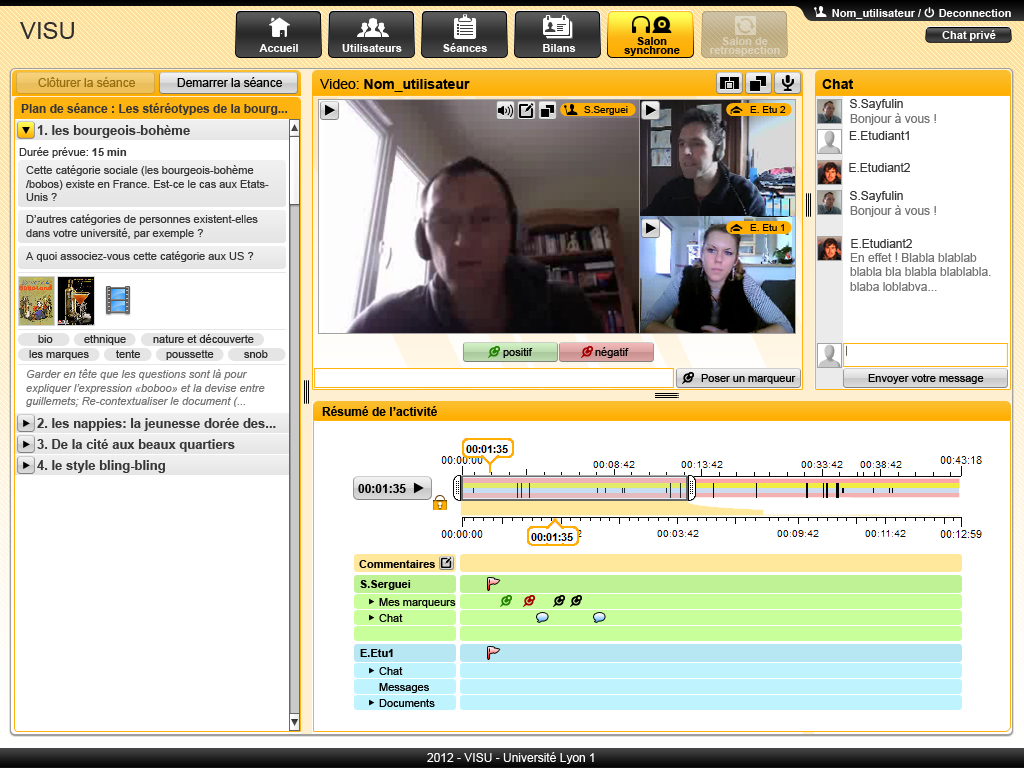
<style>
.page{position:relative;width:1024px;height:768px;background:#ffffff}
.page>*{position:absolute;margin:0}
.t1{font:11px "Arial-BoldMT";color:#ffffff}
.t2{font:24px "ArialMT";color:#2e2e2e}
.t3{font:11px/9px "Arial-BoldMT";color:#000000}
.t4{font:11px/9px "Arial-BoldMT";color:#dccfb6}
.t5{font:12px "ArialMT";color:#986d0e}
.t6{font:12px "ArialMT";color:#000000}
.t7{font:14px "Arial-BoldMT";color:#000000}
.t8{font:14px "ArialMT";color:#000000}
.t9{font:12px "ArialMT";color:#373737}
.t10{font:12px "Arial-BoldMT";color:#373737}
.t11{font:10px "ArialMT";color:#000000}
.t12{font:12px "ArialMT";color:#737373}
.t13{font:13px "Arial-BoldMT";color:#373737}
.t14{font:11px "ArialMT";color:#373737}
.t15{font:11px "Arial-BoldMT";color:#373737}
.t16{font:11px "ArialMT";color:#2b2b2b}
.t17{font:11px "ArialMT";color:#000000}
.t18{font:11px "Arial-ItalicMT";color:#737373}
.t19{font:12px "Arial-BoldMT";color:#000000}
.t20{font:11px "Arial-BoldMT";color:#000000}
.t21{font:12px "ArialMT";color:#fefefe}
</style>
<div class="page">
<p class="t1" style="left:832px;top:9px;width:89px;height:10px">Nom_utilisateur /</p>
<p class="t1" style="left:939px;top:9px;width:72px;height:8px">Deconnection</p>
<p class="t2" style="left:20px;top:22px;width:54px;height:17px">VISU</p>
<p class="t1" style="left:942px;top:30px;width:54px;height:11px">Chat privé</p>
<p class="t3" style="left:624px;top:37px;width:56px;height:19px;text-align:center">Salon<br>synchrone</p>
<p class="t4" style="left:710px;top:37px;width:70px;height:19px;text-align:center">Salon de<br>retrospection</p>
<p class="t1" style="left:259px;top:44px;width:39px;height:8px">Accueil</p>
<p class="t1" style="left:342px;top:44px;width:60px;height:8px">Utilisateurs</p>
<p class="t1" style="left:443px;top:43px;width:44px;height:9px">Séances</p>
<p class="t1" style="left:543px;top:44px;width:33px;height:8px">Bilans</p>
<p class="t5" style="left:38px;top:77px;width:97px;height:10px">Clôturer la séance</p>
<p class="t6" style="left:177px;top:77px;width:105px;height:10px">Demarrer la séance</p>
<p class="t7" style="left:320px;top:79px;width:150px;height:13px"><span class="t8">Video:</span> Nom_utilisateur</p>
<p class="t7" style="left:822px;top:79px;width:31px;height:10px">Chat</p>
<p class="t9" style="left:850px;top:99px;width:53px;height:11px">S.Sayfulin</p>
<p class="t10" style="left:21px;top:103px;width:267px;height:12px">Plan de séance : Les stéréotypes de la bourg...</p>
<p class="t11" style="left:584px;top:106px;width:44px;height:9px">S.Serguei</p>
<p class="t11" style="left:750px;top:106px;width:36px;height:7px">E. Etu 2</p>
<p class="t12" style="left:850px;top:113px;width:86px;height:12px">Bonjour à vous !</p>
<p class="t13" style="left:37px;top:125px;width:153px;height:13px">1. les bourgeois-bohème</p>
<p class="t9" style="left:849px;top:131px;width:60px;height:9px">E.Etudiant1</p>
<p class="t14" style="left:19px;top:147px;width:108px;height:11px">Durée prévue:<span class="t15"> 15 min</span></p>
<p class="t14" style="left:25px;top:165px;width:244px;height:36px">Cette catégorie sociale (les bourgeois-bohème /bobos) existe en France. Est-ce le cas aux Etats- Unis ?</p>
<p class="t9" style="left:849px;top:163px;width:61px;height:9px">E.Etudiant2</p>
<p class="t12" style="left:850px;top:205px;width:86px;height:12px">Bonjour à vous !</p>
<p class="t14" style="left:26px;top:214px;width:232px;height:25px">D’autres catégories de personnes existent-elles dans votre université, par exemple ?</p>
<p class="t11" style="left:750px;top:224px;width:34px;height:7px">E. Etu 1</p>
<p class="t14" style="left:26px;top:251px;width:228px;height:11px">A quoi associez-vous cette catégorie aux US ?</p>
<p class="t12" style="left:850px;top:253px;width:141px;height:38px">En effet ! Blabla blablab <br>blabla bla blabla blablabla.<br>blaba loblabva...</p>
<p class="t16" style="left:38px;top:335px;width:15px;height:8px">bio</p>
<p class="t16" style="left:84px;top:335px;width:42px;height:10px">ethnique</p>
<p class="t16" style="left:153px;top:334px;width:101px;height:9px">nature et découverte</p>
<p class="t16" style="left:29px;top:350px;width:60px;height:10px">les marques</p>
<p class="t16" style="left:116px;top:350px;width:24px;height:8px">tente</p>
<p class="t16" style="left:166px;top:350px;width:48px;height:10px">poussette</p>
<p class="t16" style="left:244px;top:350px;width:24px;height:8px">snob</p>
<p class="t17" style="left:503px;top:348px;width:30px;height:10px">positif</p>
<p class="t17" style="left:595px;top:347px;width:34px;height:11px">négatif</p>
<p class="t18" style="left:26px;top:369px;width:239px;height:38px">Garder en tête que les questions sont là pour expliquer l’expression «boboo» et la devise entre guillemets; Re-contextualiser le document (...</p>
<p class="t17" style="left:701px;top:374px;width:95px;height:10px">Poser un marqueur</p>
<p class="t17" style="left:868px;top:374px;width:116px;height:10px">Envoyer votre message</p>
<p class="t19" style="left:322px;top:406px;width:115px;height:10px">Résumé de l’activité</p>
<p class="t13" style="left:37px;top:418px;width:239px;height:13px">2. les nappies: la jeunesse dorée des...</p>
<p class="t13" style="left:37px;top:439px;width:198px;height:13px">3. De la cité aux beaux quartiers</p>
<p class="t13" style="left:37px;top:460px;width:128px;height:13px">4. le style bling-bling</p>
<p class="t19" style="left:358px;top:484px;width:48px;height:9px">00:01:35</p>
<p class="t20" style="left:359px;top:560px;width:76px;height:8px">Commentaires</p>
<p class="t20" style="left:360px;top:580px;width:51px;height:10px">S.Serguei</p>
<p class="t17" style="left:379px;top:598px;width:77px;height:10px">Mes marqueurs</p>
<p class="t17" style="left:379px;top:614px;width:24px;height:8px">Chat</p>
<p class="t20" style="left:360px;top:649px;width:33px;height:8px">E.Etu1</p>
<p class="t17" style="left:379px;top:667px;width:24px;height:8px">Chat</p>
<p class="t17" style="left:379px;top:683px;width:50px;height:10px">Messages</p>
<p class="t17" style="left:379px;top:699px;width:56px;height:8px">Documents</p>
<p class="t21" style="left:427px;top:752px;width:167px;height:12px">2012 - VISU - Université Lyon 1</p>
</div>
